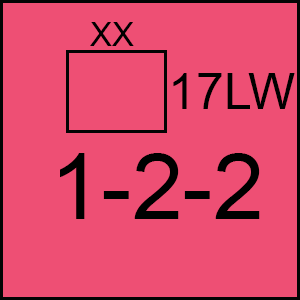
<style>
.page{position:relative;width:300px;height:300px;background:#ee4f74}
.page>*{position:absolute;margin:0}
.t1{font:33.3px "ArialMT";color:#000000}
.t2{font:50px "ArialMT";color:#000000}
.t3{font:91.7px "ArialMT";color:#000000}
</style>
<div class="page">
<p class="t1" style="left:90px;top:22px;width:44px;height:24px">XX</p>
<p class="t2" style="left:173px;top:73px;width:122px;height:36px">17LW</p>
<p class="t3" style="left:60px;top:153px;width:200px;height:66px">1-2-2</p>
</div>
